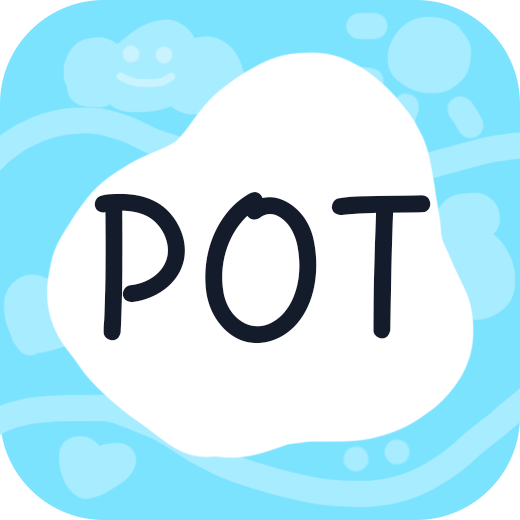
<style>
.page{position:relative;width:520px;height:520px;background:#ffffff}
.page>*{position:absolute;margin:0}
.t1{font:300px "FCMuffinRegular";color:#141b2b}
</style>
<div class="page">
<p class="t1" style="left:94px;top:192px;width:337px;height:152px">POT</p>
</div>
